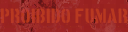
<style>
.page{position:relative;width:128px;height:32px}
.page>*{position:absolute;margin:0}
.t1{font:16.2px "BostonTraffic";color:#b83818;text-transform:uppercase;scale:1.13 1}
</style>
<div class="page">
<p class="t1" style="left:1px;top:8px;width:127px;height:16px">proibido fumar</p>
</div>
